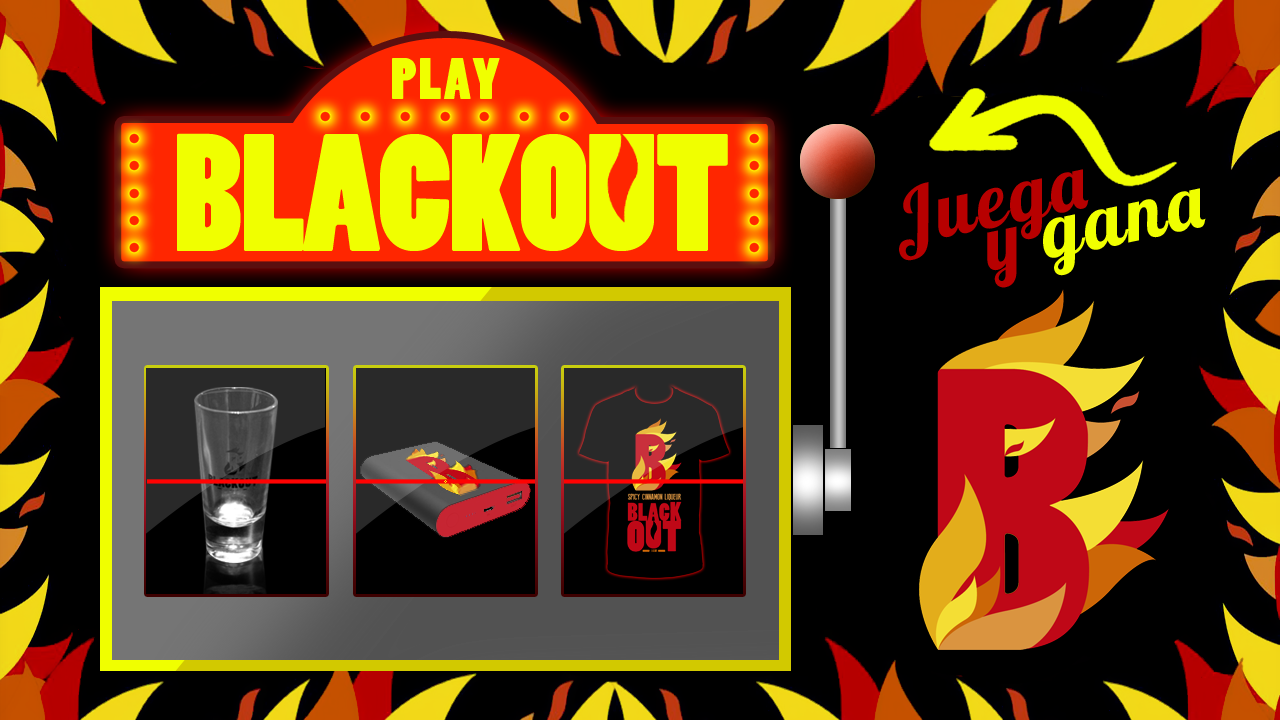
<style>
.page{position:relative;width:1280px;height:720px;background:#000000}
.page>*{position:absolute;margin:0}
.t1{font:54.2px "PoplarStd";letter-spacing:0.045em;color:#f0ff00;text-transform:uppercase}
.t2{font:156.2px "PoplarStd";letter-spacing:-0.015em;color:#f0ff00;text-transform:uppercase}
.t3{font:76.2px/74.1px "Lobster1.4";letter-spacing:0.045em;color:#b70000}
.t4{font:76.2px/74.1px "Lobster1.4";letter-spacing:0.045em;color:#b70000;text-transform:uppercase}
.t5{font:76.2px/42.6px "Lobster1.4";letter-spacing:0.045em;color:#b70000}
.t6{font:76.2px/42.6px "Lobster1.4";letter-spacing:0.045em;color:#f0ff00}
</style>
<div class="page">
<p class="t1" style="left:392px;top:58px;width:108px;height:41px">PLAY</p>
<p class="t2" style="left:177px;top:133px;width:551px;height:118px">BLACKOUT</p>
<p class="t3" style="left:899px;top:169px;width:307px;height:119px;rotate:-12deg"><span class="t4">J</span>uega<br>    <span class="t5">y</span><span class="t6"> gana</span></p>
</div>
